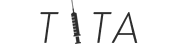
<style>
.page{position:relative;width:181px;height:50px;background:#ffffff}
.page>*{position:absolute;margin:0}
.t1{font:43.4px "BrandonGrotesque-LightItalic";letter-spacing:0.12em;color:#2d2d2d}
</style>
<div class="page">
<p class="t1" style="left:40px;top:12px;width:98px;height:31px">T  TA</p>
</div>
